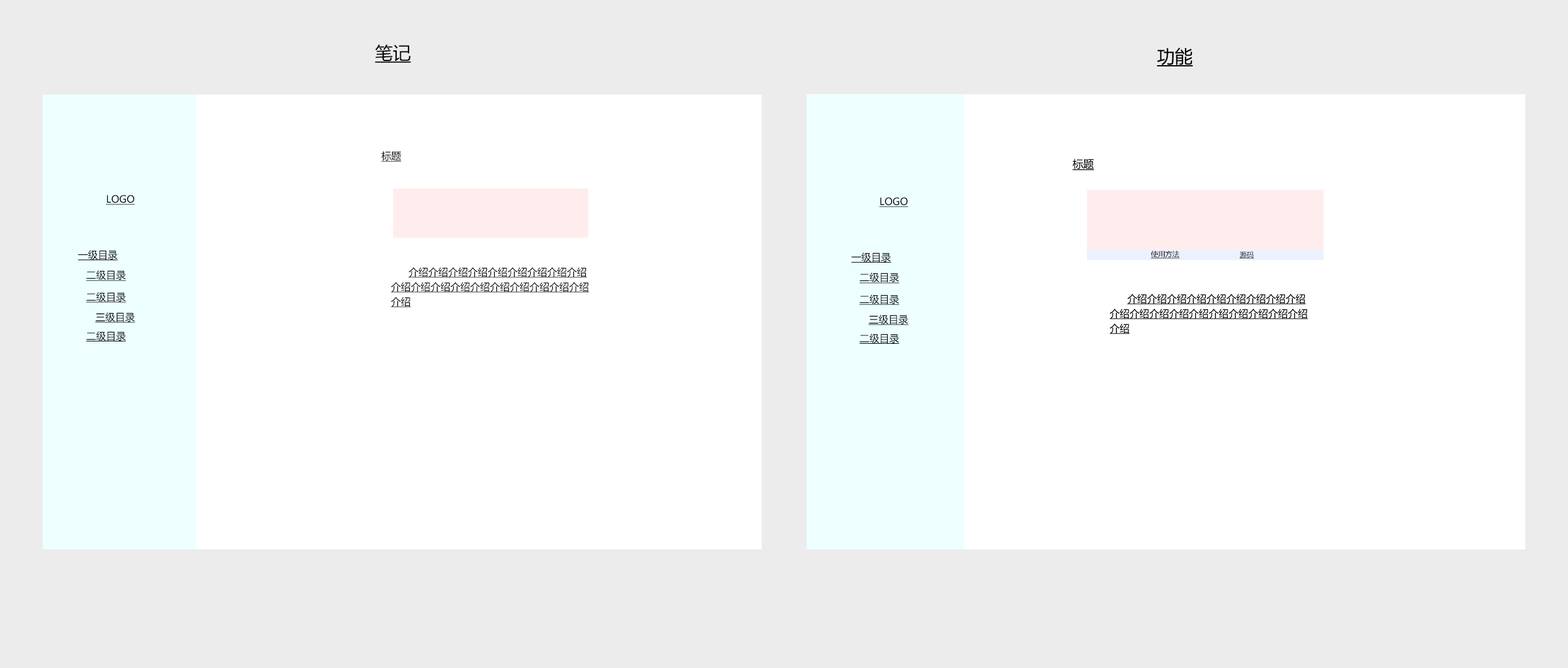
<style>
.page{position:relative;width:1568px;height:668px;background:#ffffff}
.page>*{position:absolute;margin:0}
.t1{font:17.8px "MicrosoftYaHei";color:#000000;text-decoration:underline}
.t2{font:9.9px "MicrosoftYaHei";color:#000000;text-decoration:underline}
.t3{font:7.1px "MicrosoftYaHei";color:#000000;text-decoration:underline}
.t4{font:9.9px/14.9px "MicrosoftYaHei";color:#000000;text-decoration:underline}
.t5{font:9.9px/14.9px "MicrosoftYaHei";color:#000000}
</style>
<div class="page">
<p class="t1" style="left:375px;top:44px;width:36px;height:19px">笔记</p>
<p class="t2" style="left:381px;top:151px;width:20px;height:11px">标题</p>
<p class="t2" style="left:106px;top:195px;width:29px;height:10px">LOGO</p>
<p class="t2" style="left:78px;top:250px;width:40px;height:10px">一级目录</p>
<p class="t3" style="left:1150px;top:251px;width:30px;height:8px">使用方法</p>
<p class="t3" style="left:1239px;top:251px;width:15px;height:8px">源码</p>
<p class="t4" style="left:391px;top:267px;width:198px;height:41px"><span class="t5">      </span>介绍介绍介绍介绍介绍介绍介绍介绍介绍<br>介绍介绍介绍介绍介绍介绍介绍介绍介绍介绍<br>介绍</p>
<p class="t2" style="left:86px;top:270px;width:40px;height:11px">二级目录</p>
<p class="t2" style="left:86px;top:292px;width:40px;height:11px">二级目录</p>
<p class="t2" style="left:95px;top:313px;width:40px;height:10px">三级目录</p>
<p class="t2" style="left:86px;top:332px;width:40px;height:10px">二级目录</p>
</div>
